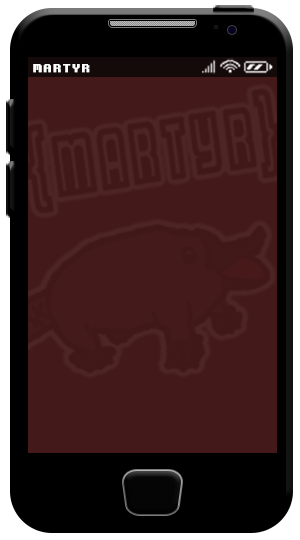
<style>
.page{position:relative;width:300px;height:540px;background:#441919}
.page>*{position:absolute;margin:0}
.t1{font:18.1px "8-Bit-Madness";color:#ffffff;font-weight:bold}
</style>
<div class="page">
<p class="t1" style="left:33px;top:64px;width:57px;height:9px">MARTYR</p>
</div>
